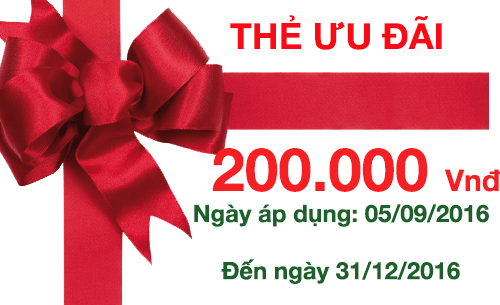
<style>
.page{position:relative;width:500px;height:305px;background:#ffffff}
.page>*{position:absolute;margin:0}
.t1{font:36px "HelveticaNeue-Bold";color:#fb0914}
.t2{font:60px "HelveticaNeue-Bold";color:#f61f24}
.t3{font:30px "HelveticaNeue-Bold";color:#f61f24}
.t4{font:24px/11.4px "HelveticaNeue-Bold";color:#1b612a}
</style>
<div class="page">
<p class="t1" style="left:230px;top:15px;width:212px;height:35px">THẺ ƯU ĐÃI</p>
<p class="t2" style="left:212px;top:148px;width:289px;height:44px">200.000 <span class="t3">Vnđ</span></p>
<p class="t4" style="left:194px;top:204px;width:295px;height:80px;text-align:center">Ngày áp dụng: 05/09/2016<br><br><br><br><br>Đến ngày 31/12/2016</p>
</div>
